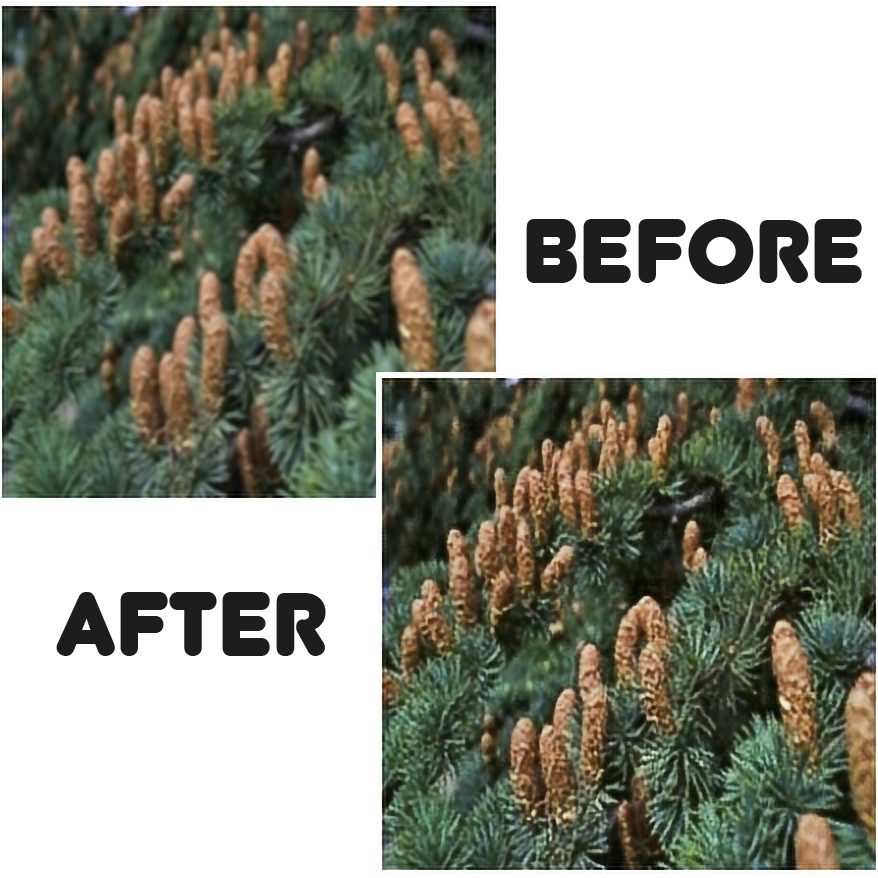
<style>
.page{position:relative;width:878px;height:878px;background:#ffffff}
.page>*{position:absolute;margin:0}
.t1{font:90px "Junegull-Regular";color:#1d1d1d;text-transform:uppercase}
</style>
<div class="page">
<p class="t1" style="left:526px;top:219px;width:336px;height:65px">before</p>
<p class="t1" style="left:56px;top:592px;width:270px;height:64px">after</p>
</div>
